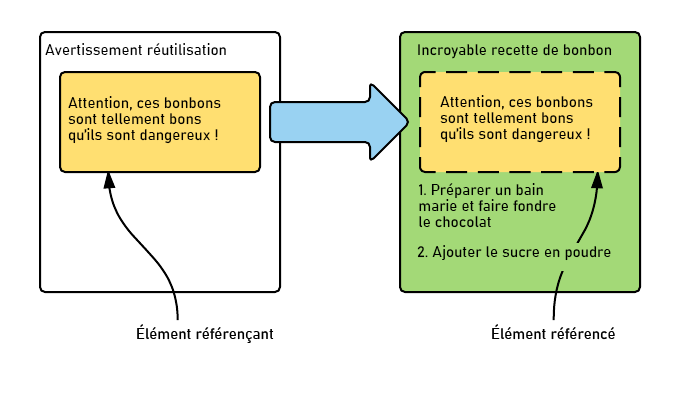
<style>
.page{position:relative;width:687px;height:400px;background:#ffffff}
.page>*{position:absolute;margin:0}
.t1{font:15px "Bahnschrift";color:#000000}
.t2{font:15px/16px "Bahnschrift";color:#000000}
</style>
<div class="page">
<p class="t1" style="left:45px;top:43px;width:181px;height:13px">Avertissement réutilisation</p>
<p class="t1" style="left:418px;top:44px;width:194px;height:15px">Incroyable recette de bonbon</p>
<p class="t2" style="left:68px;top:96px;width:153px;height:48px">Attention, ces bonbons <br>sont tellement bons<br>qu’ils sont dangereux !</p>
<p class="t2" style="left:440px;top:95px;width:153px;height:48px">Attention, ces bonbons<br>sont tellement bons<br>qu’ils sont dangereux !</p>
<p class="t2" style="left:419px;top:183px;width:137px;height:45px">1. Préparer un bain marie et faire fondre le chocolat</p>
<p class="t1" style="left:417px;top:245px;width:194px;height:16px">2. Ajouter le sucre en poudre</p>
<p class="t1" style="left:137px;top:324px;width:137px;height:19px">Élément référençant</p>
<p class="t1" style="left:492px;top:324px;width:123px;height:16px">Élément référencé</p>
</div>
